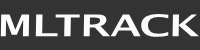
<style>
.page{position:relative;width:200px;height:50px;background:#333333}
.page>*{position:absolute;margin:0}
.t1{font:30.3px "LuxiSans-Bold";color:#fbfbfb;scale:1.39 1}
</style>
<div class="page">
<p class="t1" style="left:0px;top:13px;width:200px;height:24px">MLTRACK</p>
</div>
